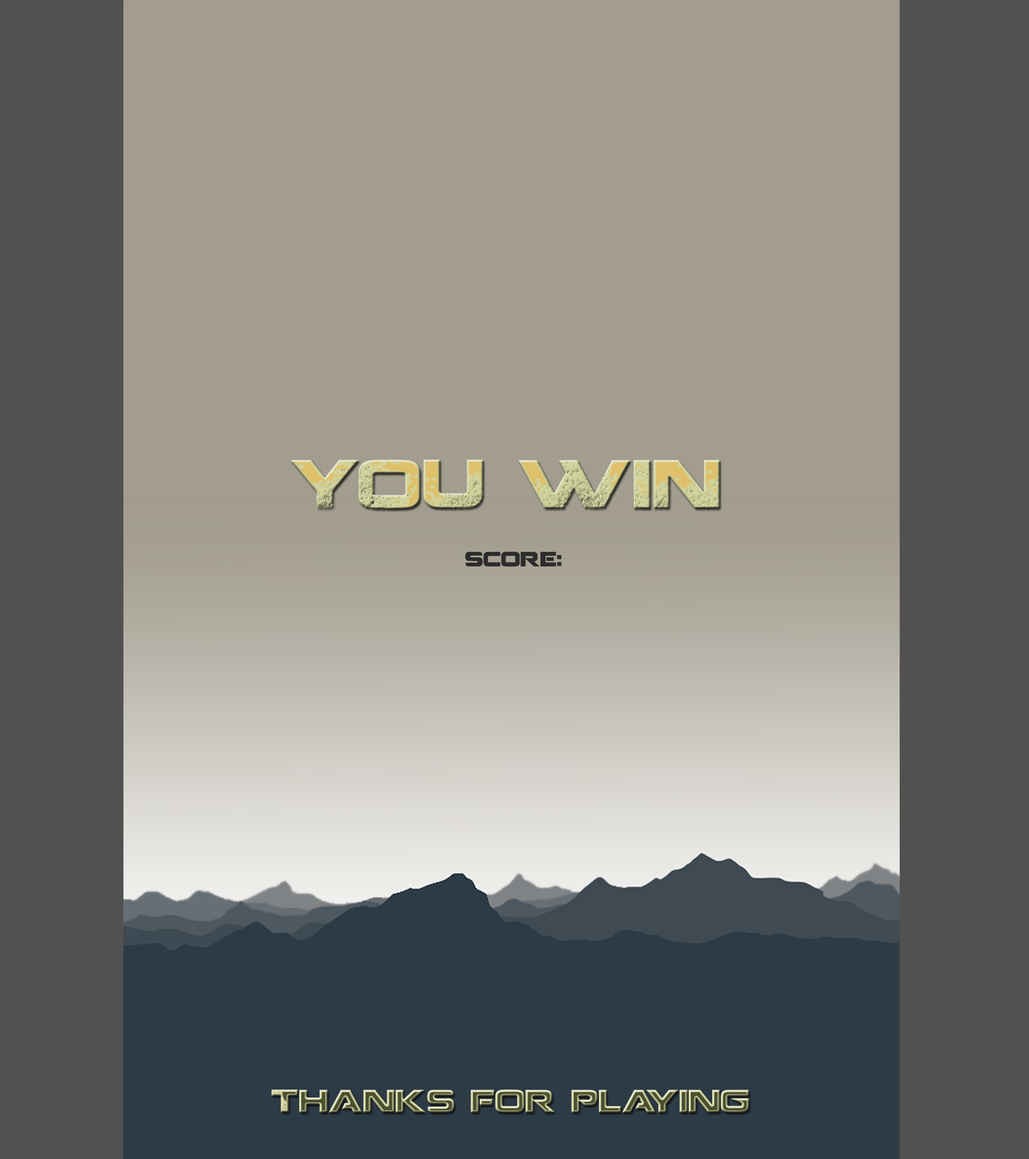
<style>
.page{position:relative;width:1029px;height:1159px;background:#a39d8f}
.page>*{position:absolute;margin:0}
.t1{font:68.1px "Coalition";letter-spacing:0.01em}
.t2{font:20.4px "Coalition";letter-spacing:0.01em;color:#2c2c2c}
.t3{font:31.8px "Coalition";letter-spacing:0.01em}
</style>
<div class="page">
<p class="t1" style="left:291px;top:459px;width:429px;height:50px">YOU WIN</p>
<p class="t2" style="left:465px;top:551px;width:97px;height:16px">score:</p>
<p class="t3" style="left:271px;top:1089px;width:478px;height:24px">Thanks for playing</p>
</div>
